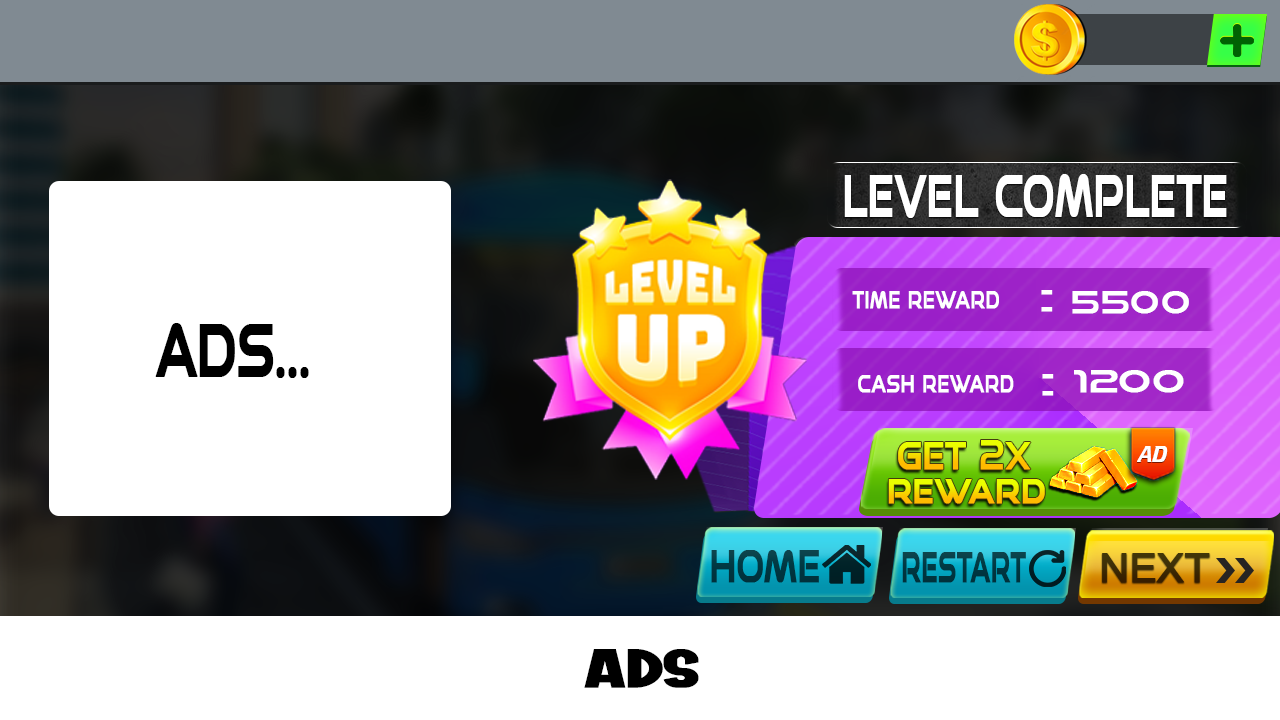
<style>
.page{position:relative;width:1280px;height:720px;background:#ffffff}
.page>*{position:absolute;margin:0}
.t1{font:58.7px "Speedy-Regular";letter-spacing:-0.025em;color:#ffffff;font-weight:bold;scale:0.63 1}
.t2{font:24.2px "Speedy-Regular";letter-spacing:-0.025em;color:#ffffff;font-weight:bold;scale:0.72 1}
.t3{font:40.2px "ArialMT";letter-spacing:-0.025em;color:#ffffff;font-weight:bold;scale:2.07 1}
.t4{font:28.8px "Speedy-Regular";letter-spacing:-0.025em;color:#ffffff;font-weight:bold;scale:1.15 1}
.t5{font:73.9px "Speedy-Regular";letter-spacing:-0.025em;color:#000000;font-weight:bold;scale:0.65 1}
.t6{font:28.8px "Speedy-Regular";letter-spacing:-0.025em;color:#ffffff;font-weight:bold;scale:1.27 1}
.t7{font:38.4px "Speedy-Regular";letter-spacing:-0.025em;font-weight:bold;scale:0.81 1}
.t8{font:34.1px "Speedy-Regular";letter-spacing:-0.025em;font-weight:bold;scale:0.88 1}
.t9{font:45.1px "Speedy-Regular";letter-spacing:-0.025em;color:#013742;font-weight:bold;scale:0.71 1}
.t10{font:42.8px "Speedy-Regular";letter-spacing:-0.025em;color:#013843;font-weight:bold;scale:0.54 1}
.t11{font:39.6px "ArialMT";letter-spacing:-0.025em;color:#3e2e07;font-weight:bold;scale:1.04 1}
.t12{font:54.4px "ROYALMOSCOWRegular";letter-spacing:-0.025em;color:#000000;font-weight:bold;scale:1.45 1}
</style>
<div class="page">
<p class="t1" style="left:844px;top:174px;width:383px;height:44px">LEVEL COMPLETE</p>
<p class="t2" style="left:852px;top:291px;width:147px;height:18px">TIME REWARD</p>
<p class="t3" style="left:1041px;top:290px;width:12px;height:22px">:</p>
<p class="t4" style="left:1072px;top:291px;width:117px;height:23px">5500</p>
<p class="t5" style="left:155px;top:323px;width:154px;height:55px">ADS...</p>
<p class="t2" style="left:858px;top:375px;width:156px;height:18px">CASH REWARD</p>
<p class="t3" style="left:1042px;top:374px;width:12px;height:22px">:</p>
<p class="t6" style="left:1074px;top:370px;width:110px;height:23px">1200</p>
<p class="t7" style="left:898px;top:440px;width:133px;height:30px">GET 2X</p>
<p class="t8" style="left:888px;top:479px;width:157px;height:25px">REWARD</p>
<p class="t9" style="left:711px;top:550px;width:108px;height:33px">HOME</p>
<p class="t10" style="left:902px;top:552px;width:124px;height:31px">RESTART</p>
<p class="t11" style="left:1102px;top:553px;width:108px;height:30px">NEXT</p>
<p class="t12" style="left:584px;top:649px;width:115px;height:39px">ADS</p>
</div>
